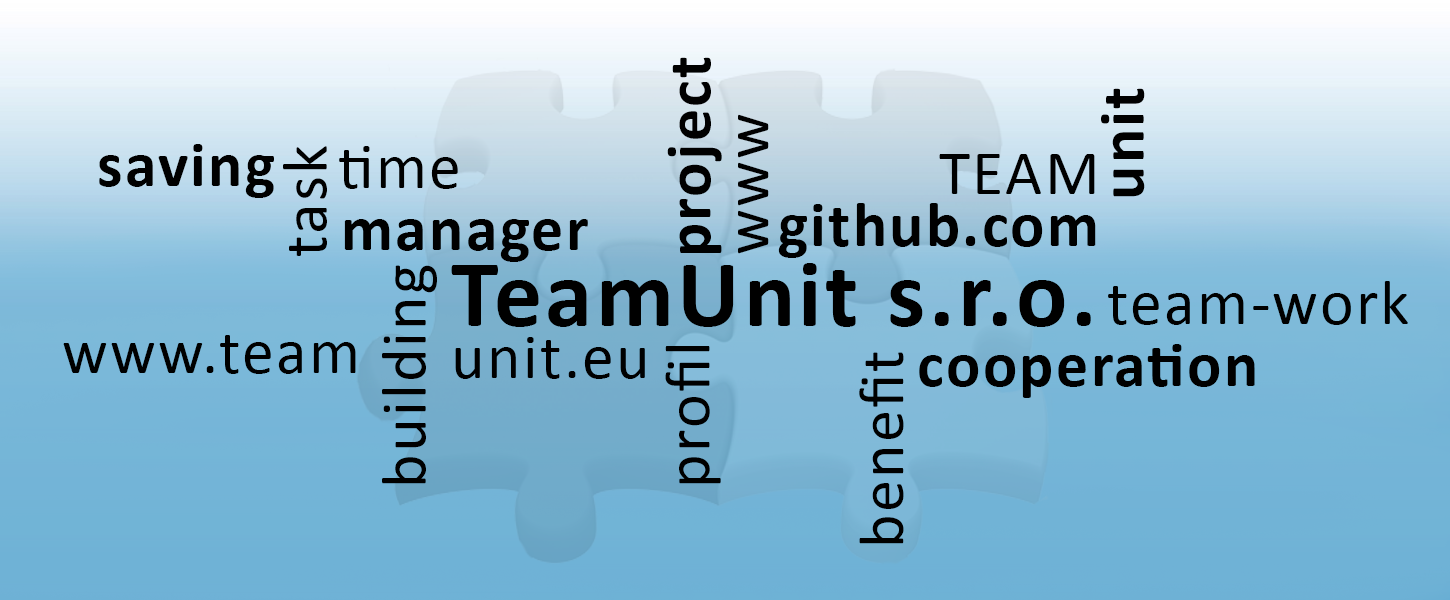
<style>
.page{position:relative;width:1450px;height:600px}
.page>*{position:absolute;margin:0}
.t1{font:64px "Calibri-Bold";letter-spacing:0.035em;color:#000000}
.t2{font:64px "Calibri";letter-spacing:0.035em;color:#000000}
.t3{font:96px "Calibri-Bold";letter-spacing:0.035em;color:#000000}
</style>
<div class="page">
<p class="t1" style="left:667px;top:57px;width:55px;height:196px;rotate:-90deg">project</p>
<p class="t1" style="left:1101px;top:88px;width:44px;height:109px;rotate:-90deg">unit</p>
<p class="t2" style="left:738px;top:114px;width:31px;height:140px;rotate:-90deg">www</p>
<p class="t1" style="left:99px;top:144px;width:175px;height:54px">saving</p>
<p class="t2" style="left:283px;top:146px;width:44px;height:110px;rotate:-90deg">task</p>
<p class="t2" style="left:339px;top:146px;width:119px;height:43px">time</p>
<p class="t2" style="left:939px;top:154px;width:156px;height:40px">TEAM</p>
<p class="t1" style="left:778px;top:203px;width:318px;height:55px">github.com</p>
<p class="t1" style="left:344px;top:219px;width:244px;height:43px">manager</p>
<p class="t2" style="left:382px;top:265px;width:55px;height:219px;rotate:-90deg">building</p>
<p class="t3" style="left:451px;top:263px;width:640px;height:64px">TeamUnit s.r.o.</p>
<p class="t2" style="left:1108px;top:281px;width:300px;height:44px">team-work</p>
<p class="t2" style="left:63px;top:335px;width:293px;height:39px">www.team</p>
<p class="t2" style="left:455px;top:337px;width:190px;height:42px">unit.eu</p>
<p class="t2" style="left:665px;top:346px;width:56px;height:138px;rotate:-90deg">profil</p>
<p class="t2" style="left:859px;top:352px;width:45px;height:192px;rotate:-90deg">benefit</p>
<p class="t1" style="left:919px;top:344px;width:336px;height:54px">cooperation</p>
</div>
